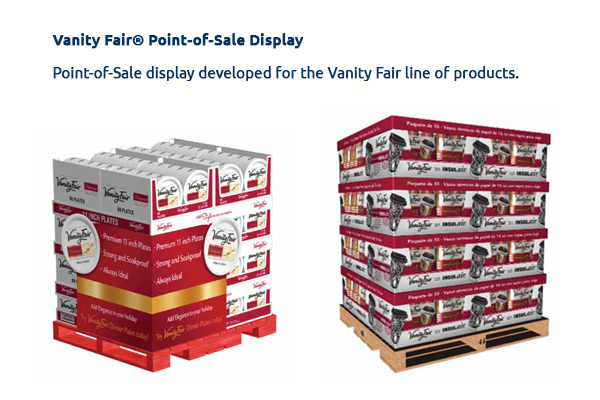
<style>
.page{position:relative;width:600px;height:400px;background:#ffffff}
.page>*{position:absolute;margin:0}
.t1{font:25px/33.3px "Ubuntu";color:#003366;font-weight:bold}
.t2{font:25px/37.5px "Ubuntu-Bold";color:#003366;font-weight:bold}
.t3{font:25px/25px "Ubuntu";color:#003366;font-weight:bold}
</style>
<div class="page">
<p class="t1" style="left:52px;top:33px;width:467px;height:48px"><span class="t2">Vanity Fair® Point-of-Sale Display<br></span>Point-of-Sale display developed for the Vanity Fair line of products<span class="t3">.</span></p>
</div>
